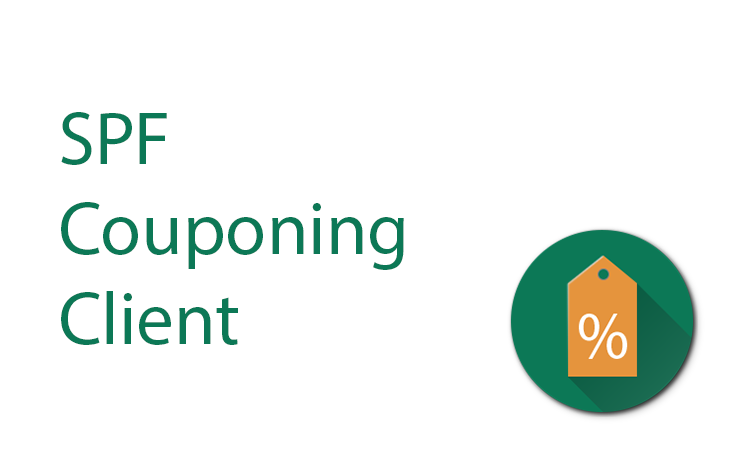
<style>
.page{position:relative;width:743px;height:455px;background:#ffffff}
.page>*{position:absolute;margin:0}
.t1{font:75px "MyriadPro-Regular";color:#0c7856}
</style>
<div class="page">
<p class="t1" style="left:61px;top:112px;width:343px;height:233px">SPF<br>Couponing<br>Client</p>
</div>
